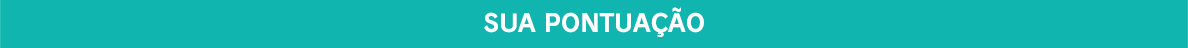
<style>
.page{position:relative;width:1188px;height:48px;background:#11b5af}
.page>*{position:absolute;margin:0}
.t1{font:24px "RodinPro-B";color:#ffffff}
</style>
<div class="page">
<p class="t1" style="left:484px;top:7px;width:220px;height:30px">SUA PONTUAÇÃO</p>
</div>
